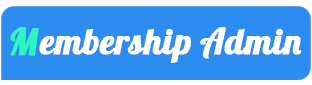
<style>
.page{position:relative;width:312px;height:85px;background:#2d8cf0}
.page>*{position:absolute;margin:0}
.t1{font:37.3px "Lobster-Regular";color:#2df5be;font-weight:bold}
.t2{font:36px "Lobster-Regular";color:#ffffff;font-weight:bold}
</style>
<div class="page">
<p class="t1" style="left:10px;top:27px;width:29px;height:29px">M</p>
<p class="t2" style="left:39px;top:27px;width:262px;height:36px">embership Admin</p>
</div>
